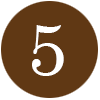
<style>
.page{position:relative;width:100px;height:100px;background:#603814}
.page>*{position:absolute;margin:0}
.t1{font:72px "Century";color:#ffffff}
</style>
<div class="page">
<p class="t1" style="left:32px;top:25px;width:32px;height:51px">5</p>
</div>
